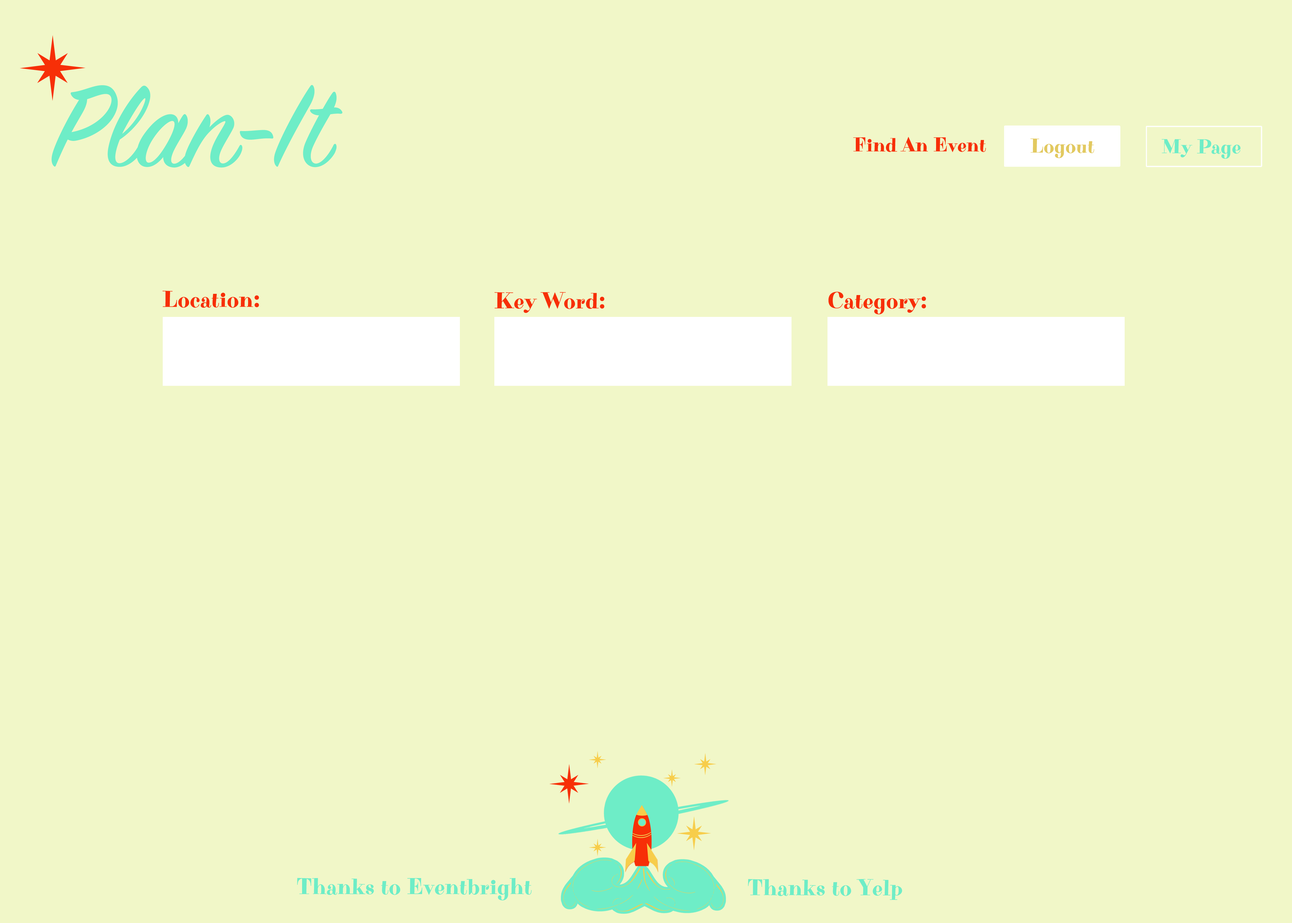
<style>
.page{position:relative;width:1292px;height:923px;background:#f1f7c8}
.page>*{position:absolute;margin:0}
.t1{font:128.2px "SignPainter-HouseScript";color:#6eedc7}
.t2{font:20.2px "PurplePurse-Regular";color:#f72f07}
.t3{font:20.2px "PurplePurse-Regular";color:#e2c960}
.t4{font:20.2px "PurplePurse-Regular";color:#6eedc7}
.t5{font:23.1px "PurplePurse-Regular";color:#f72f07}
.t6{font:23.1px "PurplePurse-Regular";color:#6eedc7}
</style>
<div class="page">
<p class="t1" style="left:51px;top:85px;width:291px;height:83px">Plan-It</p>
<p class="t2" style="left:853px;top:137px;width:133px;height:15px">Find An Event</p>
<p class="t3" style="left:1030px;top:138px;width:64px;height:20px">Logout</p>
<p class="t4" style="left:1162px;top:139px;width:79px;height:20px">My Page</p>
<p class="t5" style="left:162px;top:291px;width:97px;height:17px">Location:</p>
<p class="t5" style="left:494px;top:292px;width:110px;height:21px">Key Word:</p>
<p class="t5" style="left:828px;top:292px;width:98px;height:22px">Category:</p>
<p class="t6" style="left:297px;top:878px;width:235px;height:22px">Thanks to Eventbright</p>
<p class="t6" style="left:748px;top:879px;width:154px;height:21px">Thanks to Yelp</p>
</div>
